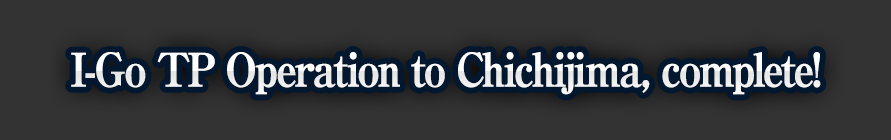
<style>
.page{position:relative;width:891px;height:140px;background:#333333}
.page>*{position:absolute;margin:0}
.t1{font:46px "RyuminPro-ExBold";letter-spacing:-0.08em;color:#ffffff;font-weight:bold;scale:0.9 1}
</style>
<div class="page">
<p class="t1" style="left:71px;top:52px;width:750px;height:43px">I-Go TP Operation to Chichijima, complete!</p>
</div>
